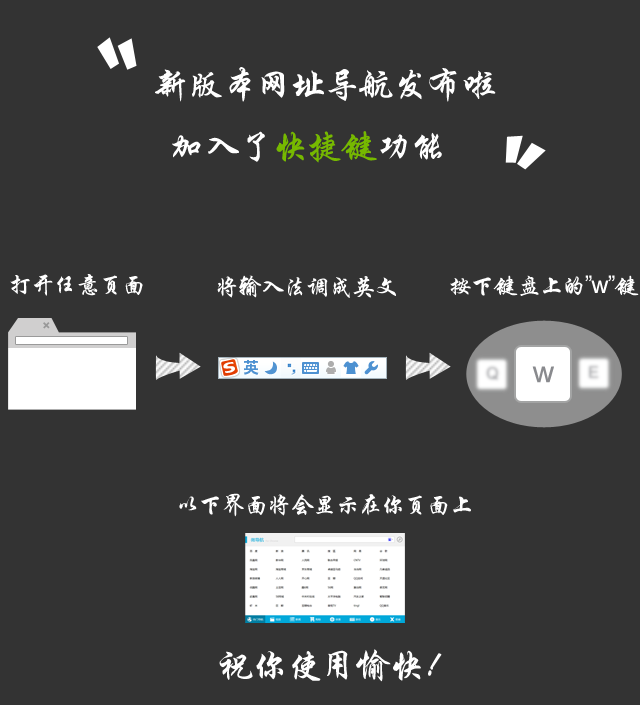
<style>
.page{position:relative;width:640px;height:705px;background:#333333}
.page>*{position:absolute;margin:0}
.t1{font:24px "STXingkai";letter-spacing:-0.05em;color:#ffffff}
.t2{font:24px "ArialMT";letter-spacing:-0.05em;color:#ffffff}
.t3{font:30px "ArialMT";letter-spacing:-0.05em;color:#898a8e}
.t4{font:36px "STXingkai";letter-spacing:-0.05em;color:#ffffff}
</style>
<div class="page">
<p class="t1" style="left:10px;top:274px;width:133px;height:22px">打开任意页面</p>
<p class="t1" style="left:217px;top:275px;width:179px;height:23px">将输入法调成英文</p>
<p class="t1" style="left:450px;top:275px;width:189px;height:21px">按下键盘上的<span class="t2">”w”</span>键</p>
<p class="t3" style="left:532px;top:366px;width:22px;height:17px">w</p>
<p class="t1" style="left:179px;top:493px;width:292px;height:24px">以下界面将会显示在你页面上</p>
<p class="t4" style="left:219px;top:649px;width:223px;height:33px">祝你使用愉快！</p>
</div>
